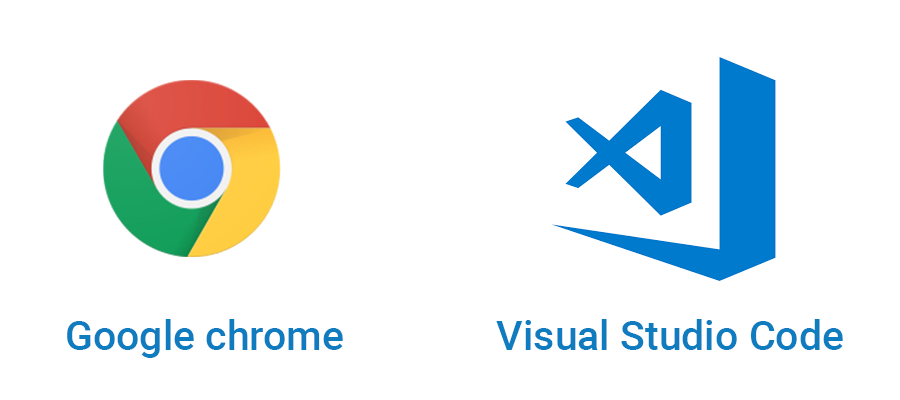
<style>
.page{position:relative;width:900px;height:400px;background:#ffffff}
.page>*{position:absolute;margin:0}
.t1{font:41px "Roboto-Medium";color:#0f7cbf}
</style>
<div class="page">
<p class="t1" style="left:67px;top:319px;width:276px;height:39px">Google chrome</p>
<p class="t1" style="left:496px;top:319px;width:347px;height:31px">Visual Studio Code</p>
</div>
